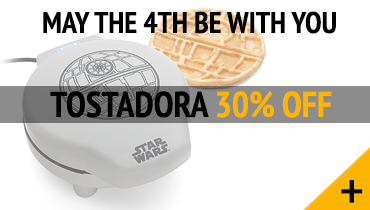
<style>
.page{position:relative;width:370px;height:210px;background:#ffffff}
.page>*{position:absolute;margin:0}
.t1{font:30px "PTSans-NarrowBold";color:#000000}
.t2{font:36px "PTSans-NarrowBold";color:#000000}
.t3{font:36px "PTSans-NarrowBold";color:#ffb400}
.t4{font:60px "PTSans-Narrow";color:#000000}
</style>
<div class="page">
<p class="t1" style="left:43px;top:11px;width:293px;height:23px">MAY THE 4TH BE WITH YOU</p>
<p class="t2" style="left:50px;top:91px;width:282px;height:27px">TOSTADORA<span class="t3"> 30% OFF</span></p>
<p class="t4" style="left:341px;top:180px;width:22px;height:23px">+</p>
</div>
